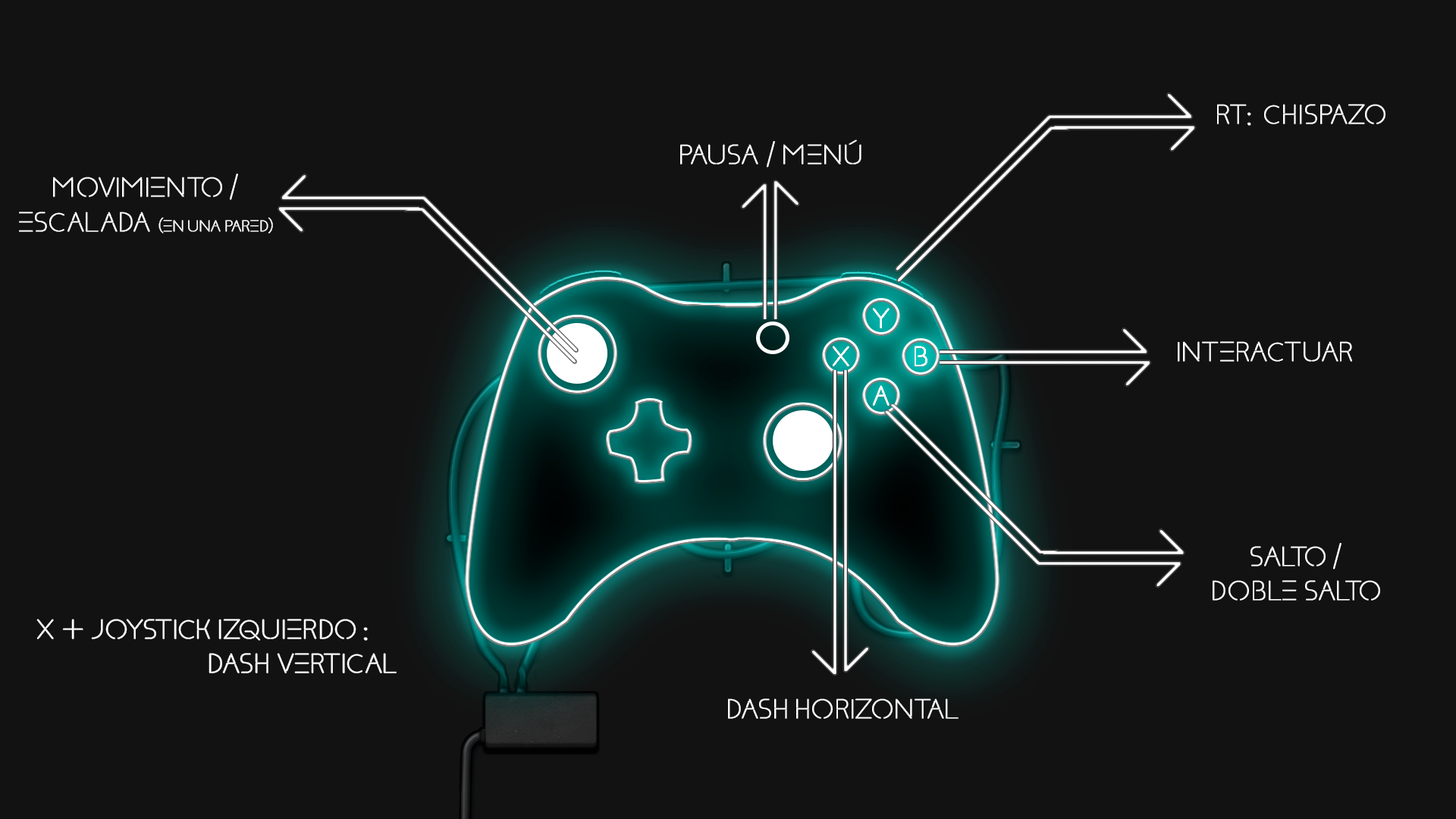
<style>
.page{position:relative;width:1456px;height:819px;background:#121212}
.page>*{position:absolute;margin:0}
.t1{font:28.8px "Klaxons";color:#ffffff;font-weight:bold}
.t2{font:16.7px "Klaxons";color:#ffffff;font-weight:bold}
</style>
<div class="page">
<p class="t1" style="left:1217px;top:104px;width:168px;height:22px">RT: CHISPAZO</p>
<p class="t1" style="left:680px;top:140px;width:181px;height:28px">Pausa / Menú</p>
<p class="t1" style="left:19px;top:174px;width:254px;height:60px;text-align:center">Movimiento /<br>Escalada <span class="t2">(en una pared)</span></p>
<p class="t1" style="left:1178px;top:341px;width:174px;height:21px">Interactuar</p>
<p class="t1" style="left:1213px;top:543px;width:167px;height:58px;text-align:center">salto /<br>doble salto</p>
<p class="t1" style="left:36px;top:619px;width:361px;height:54px;text-align:center">x + Joystick Izquierdo : <br>Dash Vertical</p>
<p class="t1" style="left:728px;top:698px;width:231px;height:21px">Dash Horizontal</p>
</div>
